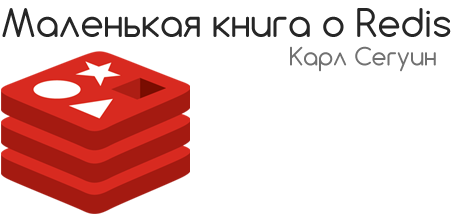
<style>
.page{position:relative;width:454px;height:214px;background:#ffffff}
.page>*{position:absolute;margin:0}
.t1{font:37px "Comfortaa";color:#262626}
.t2{font:24px "Comfortaa";color:#717171}
</style>
<div class="page">
<p class="t1" style="left:2px;top:8px;width:449px;height:29px">Маленькая книга о Redis</p>
<p class="t2" style="left:290px;top:46px;width:146px;height:26px">Карл Сегуин</p>
</div>
